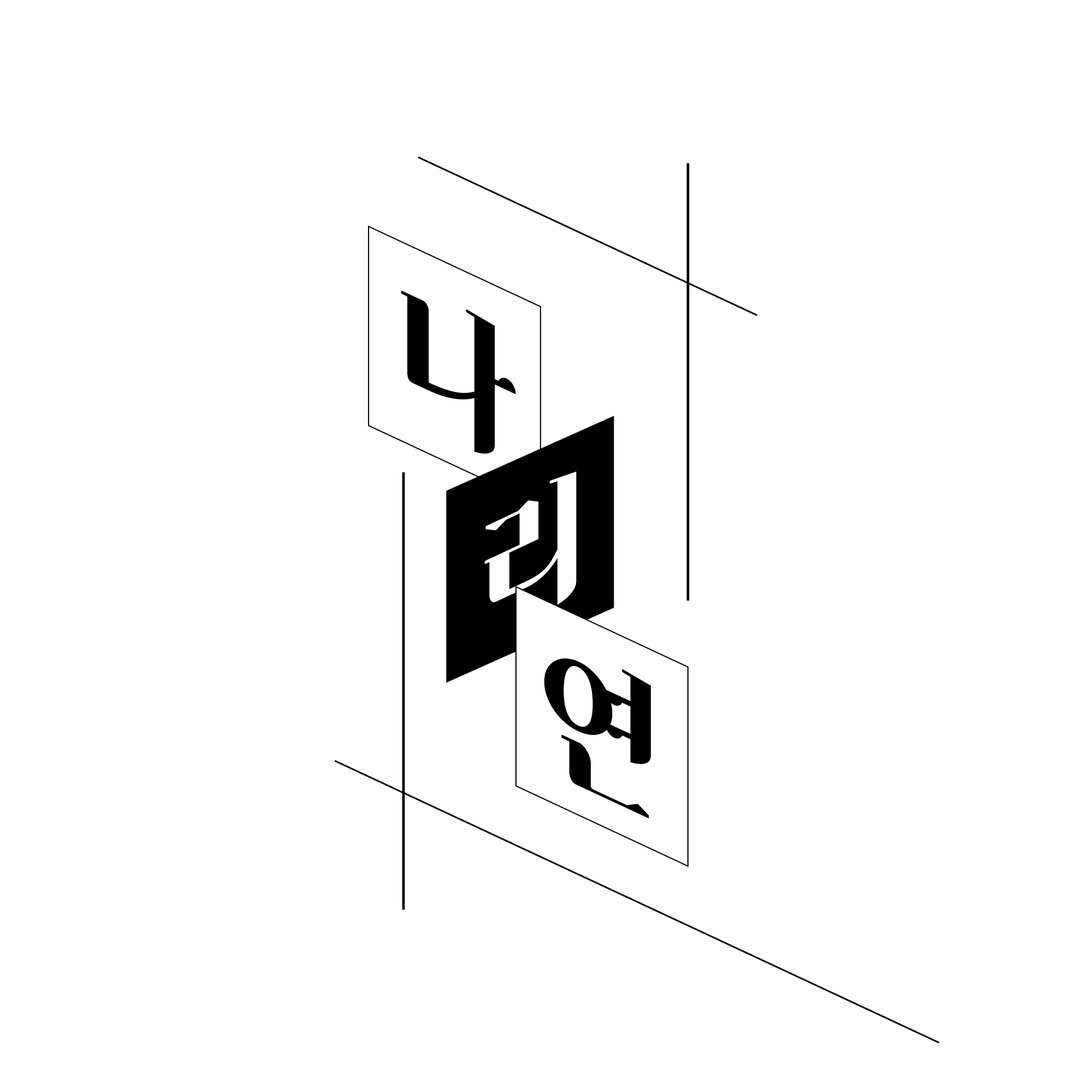
<style>
.page{position:relative;width:1092px;height:1092px;background:#ffffff}
.page>*{position:absolute;margin:0}
.t1{font:163.8px "HSBomBaram2.0";color:#000000;scale:0.88 1}
.t2{font:150.1px "HSBomBaram2.0";color:#ffffff;scale:0.88 1}
</style>
<div class="page">
<p class="t1" style="left:401px;top:290px;width:115px;height:164px;rotate:25deg">나</p>
<p class="t2" style="left:484px;top:471px;width:93px;height:134px;rotate:-25deg">리</p>
<p class="t1" style="left:544px;top:658px;width:107px;height:161px;rotate:25deg">연</p>
</div>
